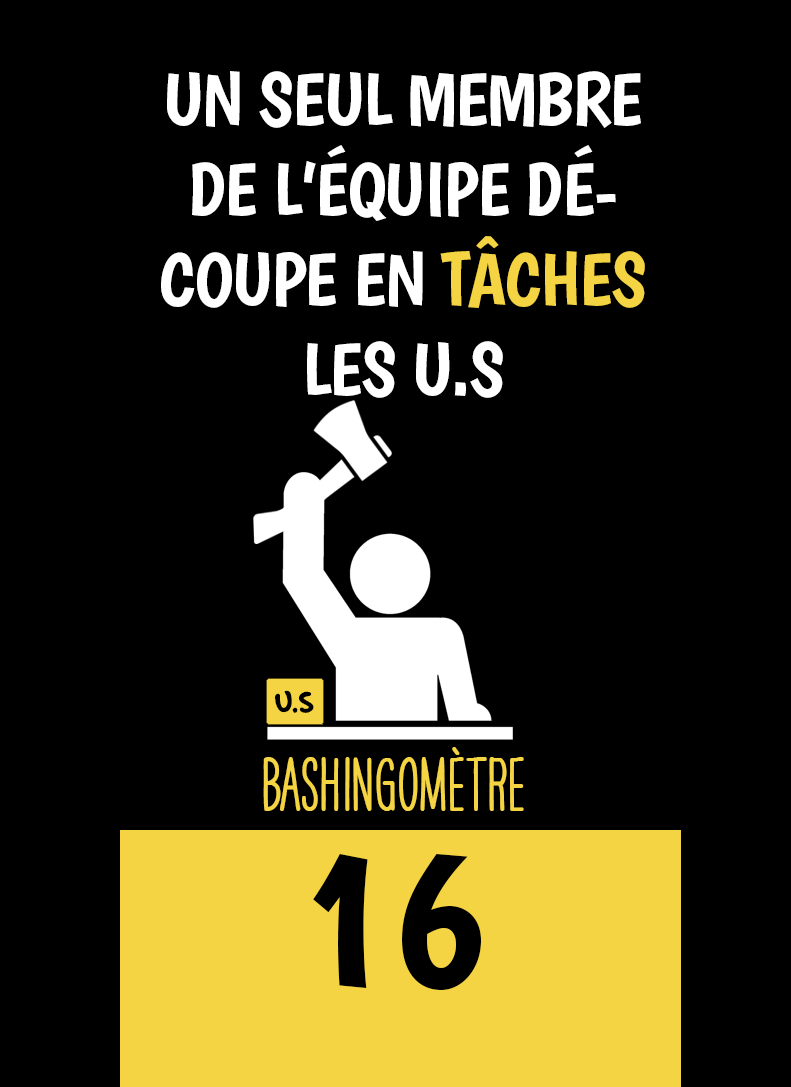
<style>
.page{position:relative;width:791px;height:1087px;background:#000000}
.page>*{position:absolute;margin:0}
.t1{font:75px "Boogaloo-Regular";letter-spacing:-0.02em;color:#ffffff}
.t2{font:75px "Boogaloo-Regular";letter-spacing:-0.02em;color:#f4d443}
.t3{font:33.3px "OakStreetW01-Regular";letter-spacing:-0.02em;color:#000000}
.t4{font:66.7px "HAVEANICEDAYTallW04-Bold";color:#f4d443}
.t5{font:200px "Boogaloo-Regular";color:#000000}
</style>
<div class="page">
<p class="t1" style="left:161px;top:71px;width:484px;height:327px;text-align:center">UN SEUL MEMBRE DE L’ÉQUIPE DÉCOUPE EN <span class="t2">TÂCHES </span>LES U.S</p>
<p class="t3" style="left:275px;top:690px;width:39px;height:23px">U.S</p>
<p class="t4" style="left:263px;top:747px;width:261px;height:64px">BASHINgomètre</p>
<p class="t5" style="left:313px;top:854px;width:168px;height:136px">16</p>
</div>
